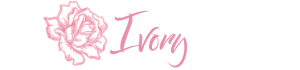
<style>
.page{position:relative;width:300px;height:70px;background:#ffffff}
.page>*{position:absolute;margin:0}
.t1{font:60px "Bantham";color:#ea90ae}
</style>
<div class="page">
<p class="t1" style="left:110px;top:10px;width:77px;height:58px">Ivory</p>
</div>
